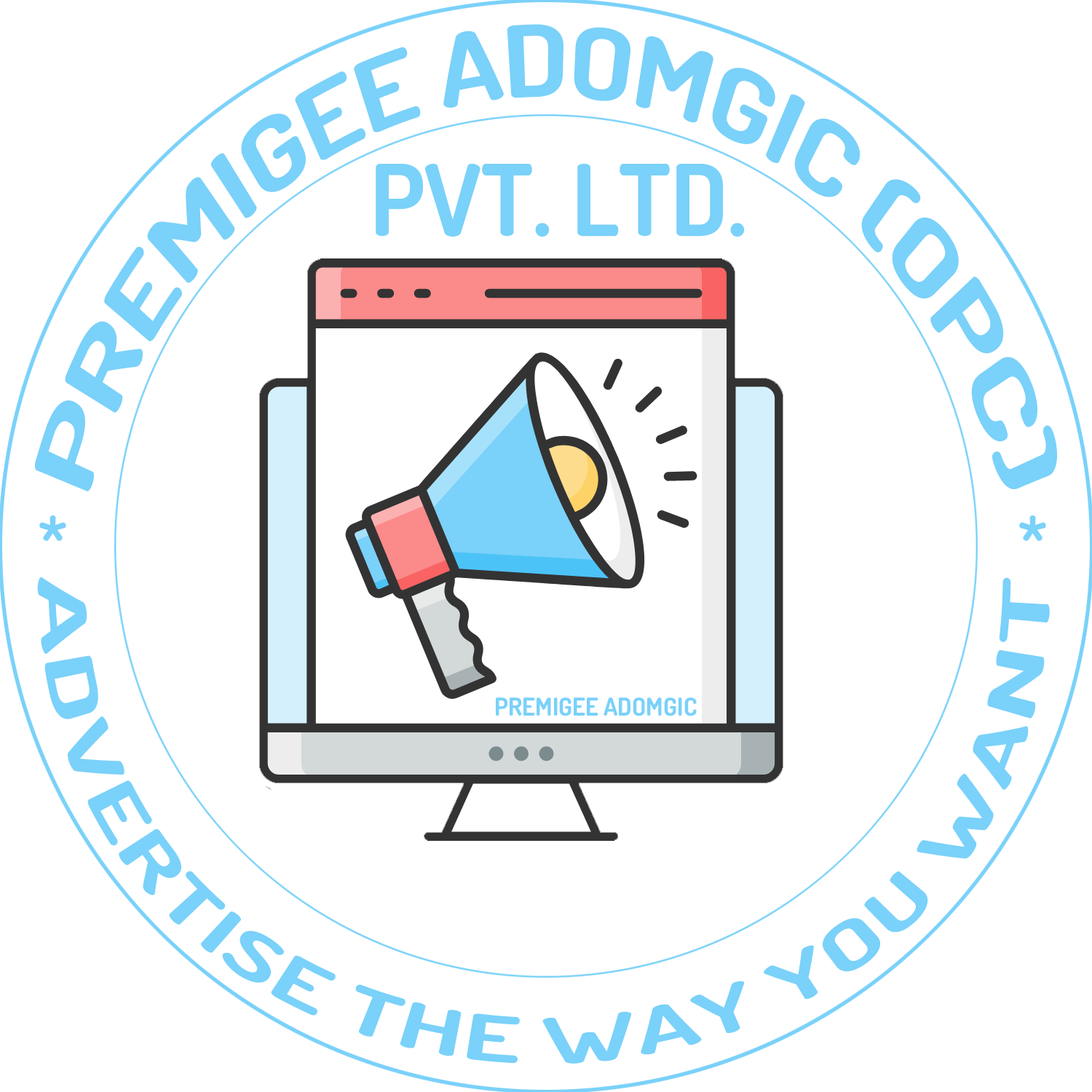
<style>
.page{position:relative;width:1092px;height:1092px;background:#ffffff}
.page>*{position:absolute;margin:0}
.t1{font:98.6px "Dosis-Bold";color:#7ad1f9;scale:0.83 1}
.t2{font:98.6px "Dosis-Bold";color:#7ad1f9}
.t3{font:62.8px "Dosis-Bold";color:#7ad1f9}
.t4{font:62.8px "Dosis-Bold";color:#7ad1f9;scale:1.04 1}
.t5{font:24.6px "Dosis-Bold";color:#7ad1f9}
</style>
<div class="page">
<p class="t1" style="left:35px;top:24px;width:1022px;height:467px">PREMIGEE ADOMGIC (OPC)</p>
<p class="t2" style="left:376px;top:164px;width:369px;height:73px">PVT. LTD.</p>
<p class="t3" style="left:39px;top:515px;width:27px;height:26px">*</p>
<p class="t3" style="left:1019px;top:515px;width:27px;height:26px">*</p>
<p class="t4" style="left:37px;top:577px;width:1013px;height:487px">ADVERTISE THE WAY YOU WANT</p>
<p class="t5" style="left:496px;top:697px;width:201px;height:19px">PREMIGEE ADOMGIC</p>
</div>
